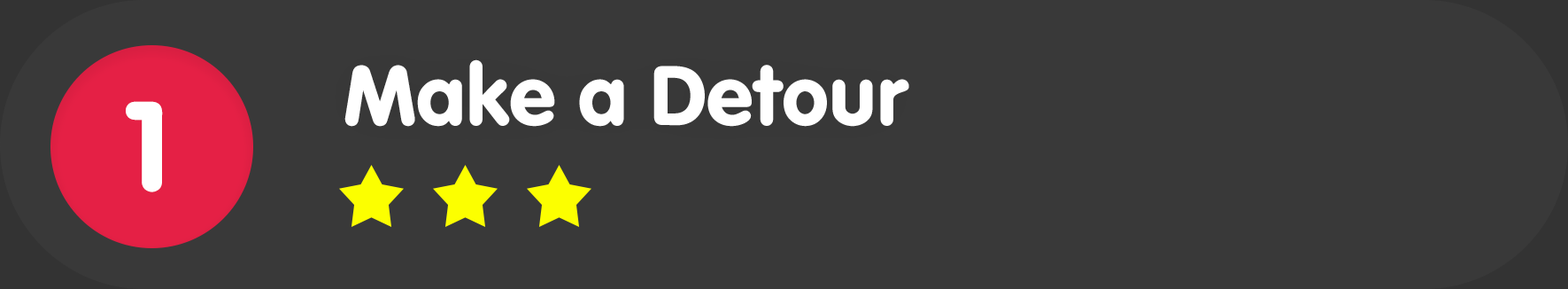
<style>
.page{position:relative;width:1568px;height:289px;background:#393939}
.page>*{position:absolute;margin:0}
.t1{font:88.5px "VAGRundschriftD";color:#ffffff}
.t2{font:132.8px "VAGRundschriftD";color:#ffffff}
</style>
<div class="page">
<p class="t1" style="left:344px;top:59px;width:565px;height:68px">Make a Detour</p>
<p class="t2" style="left:126px;top:101px;width:37px;height:91px">1</p>
</div>
